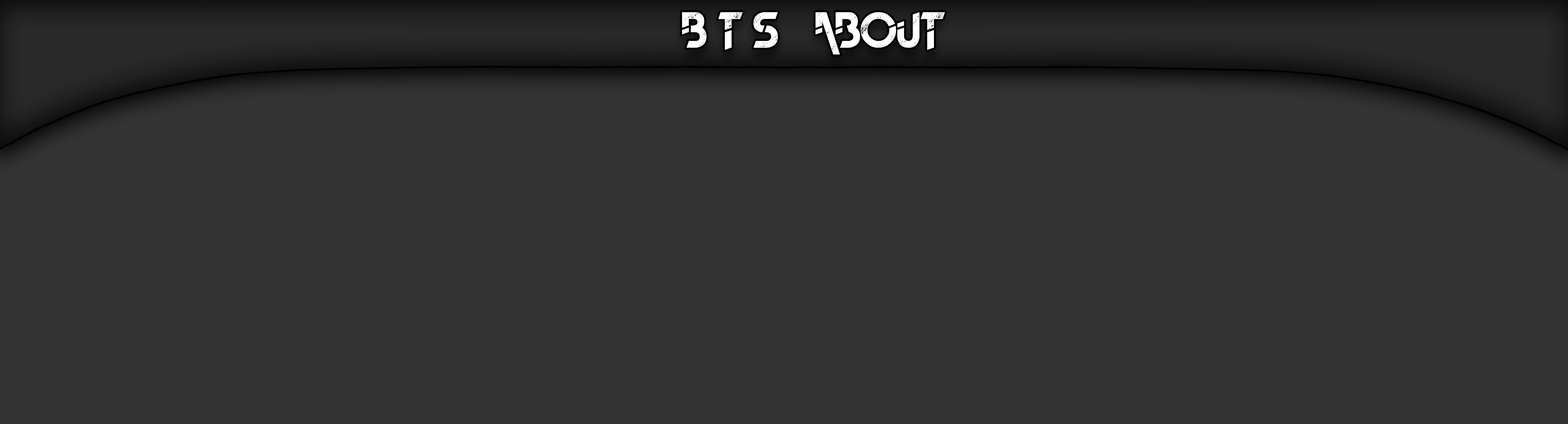
<style>
.page{position:relative;width:1568px;height:424px;background:#333333}
.page>*{position:absolute;margin:0}
.t1{font:51.8px "TheFrontMan2demo";color:#ffffff}
.t2{font:51.8px "TheFrontMan2demo";letter-spacing:0.25em;color:#ffffff}
</style>
<div class="page">
<p class="t1" style="left:682px;top:12px;width:263px;height:43px"><span class="t2">Bts</span> about</p>
</div>
